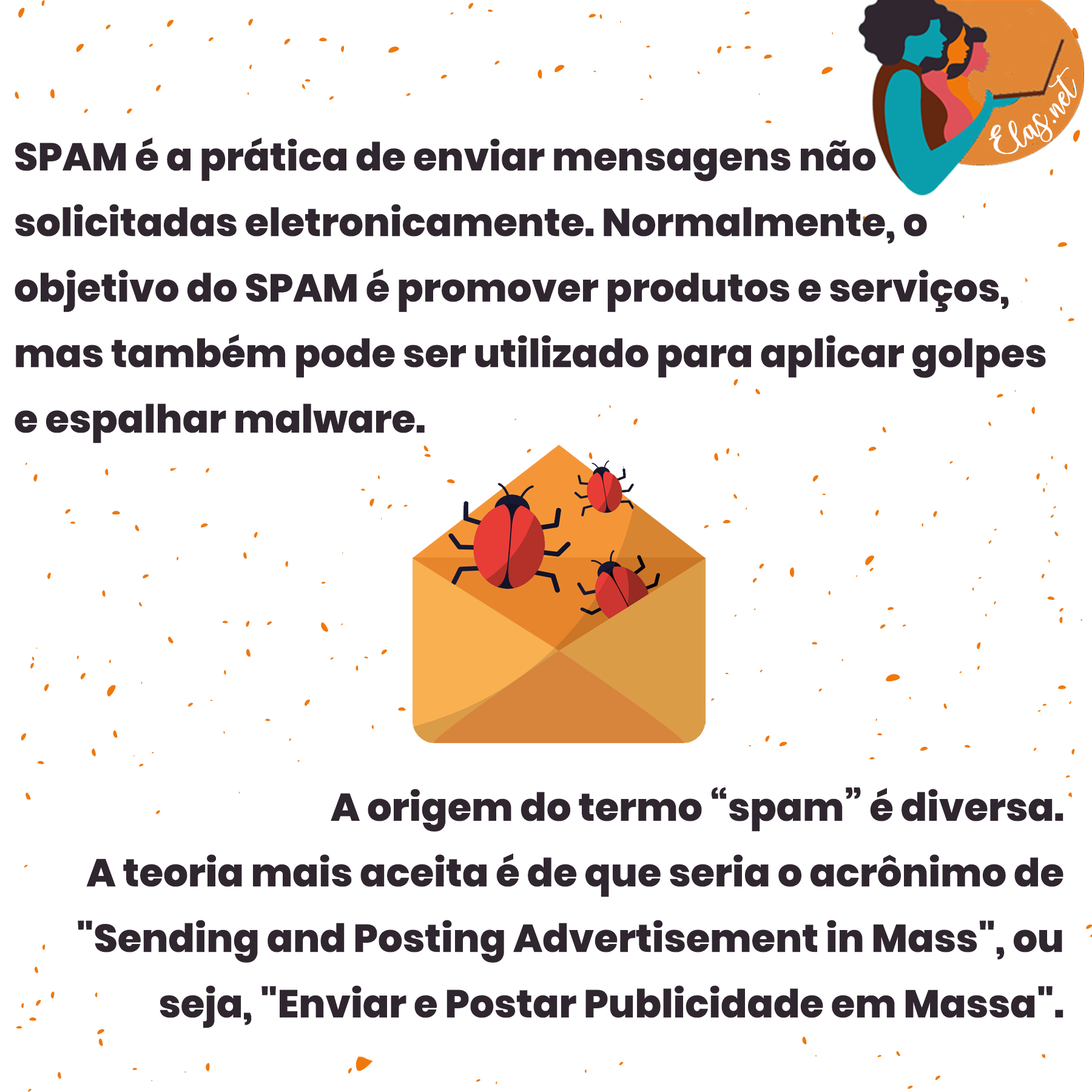
<style>
.page{position:relative;width:1092px;height:1092px;background:#ffffff}
.page>*{position:absolute;margin:0}
.t1{font:25px "charlinda-Regular";color:#ffffff;scale:1.18 1}
.t2{font:38.8px/65.5px "Poppins-ExtraBold";color:#2f262f}
</style>
<div class="page">
<p class="t1" style="left:989px;top:67px;width:88px;height:87px;rotate:-42deg">Elas.net</p>
<p class="t2" style="left:15px;top:137px;width:1031px;height:306px">SPAM é a prática de enviar mensagens não <br>solicitadas eletronicamente. Normalmente, o <br>objetivo do SPAM é promover produtos e serviços, <br>mas também pode ser utilizado para aplicar golpes <br>e espalhar malware.</p>
<p class="t2" style="left:78px;top:787px;width:985px;height:241px;text-align:right">A origem do termo “spam” é diversa.<br>A teoria mais aceita é de que seria o acrônimo de<br>"Sending and Posting Advertisement in Mass", ou<br>seja, "Enviar e Postar Publicidade em Massa".</p>
</div>
